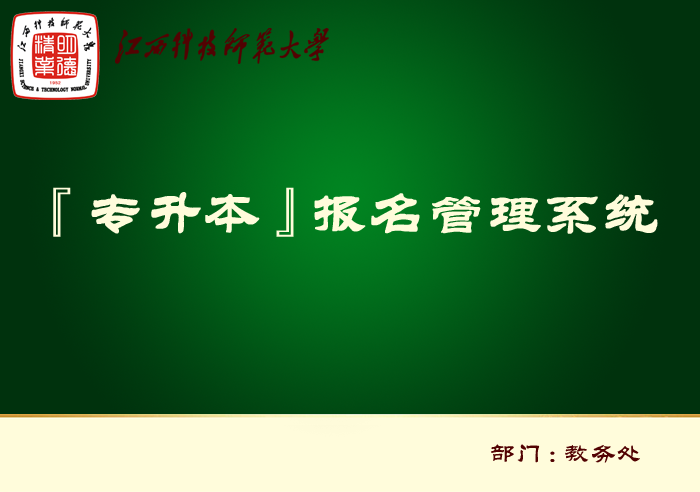
<style>
.page{position:relative;width:700px;height:492px}
.page>*{position:absolute;margin:0}
.t1{font:54.2px "FZL2K--GBK1-0";letter-spacing:0.05em;color:#fffcdb;font-weight:bold}
.t2{font:25px "FZL2K--GBK1-0";letter-spacing:0.05em;color:#520202}
</style>
<div class="page">
<p class="t1" style="left:53px;top:187px;width:241px;height:50px">『专升本』</p>
<p class="t1" style="left:314px;top:193px;width:344px;height:41px">报名管理系统</p>
<p class="t2" style="left:491px;top:444px;width:149px;height:19px">部门:教务处</p>
</div>
